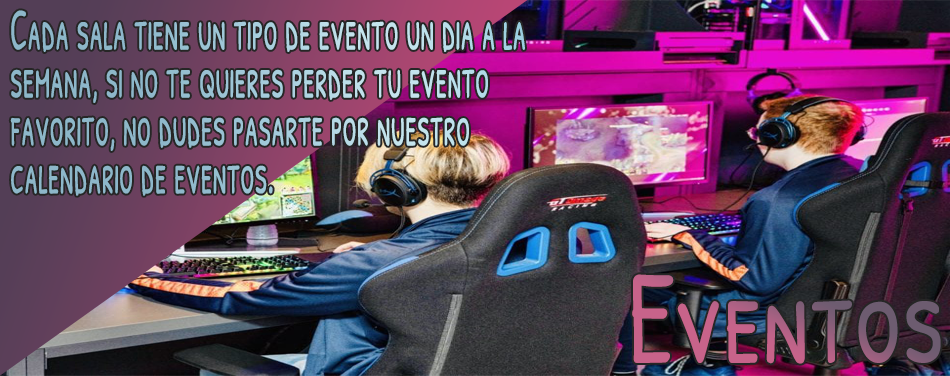
<style>
.page{position:relative;width:950px;height:376px}
.page>*{position:absolute;margin:0}
.t1{font:59.9px/47.9px "PatrickHandSC-Regular";scale:0.53 1}
.t2{font:133.6px "PatrickHandSC-Regular";scale:0.79 1}
</style>
<div class="page">
<p class="t1" style="left:10px;top:10px;width:515px;height:186px">Cada sala tiene un tipo de evento un dia a la<br>semana, si no te quieres perder tu evento<br>favorito, no dudes pasarte por nuestro<br>calendario de eventos.</p>
<p class="t2" style="left:632px;top:274px;width:309px;height:90px">Eventos</p>
</div>
